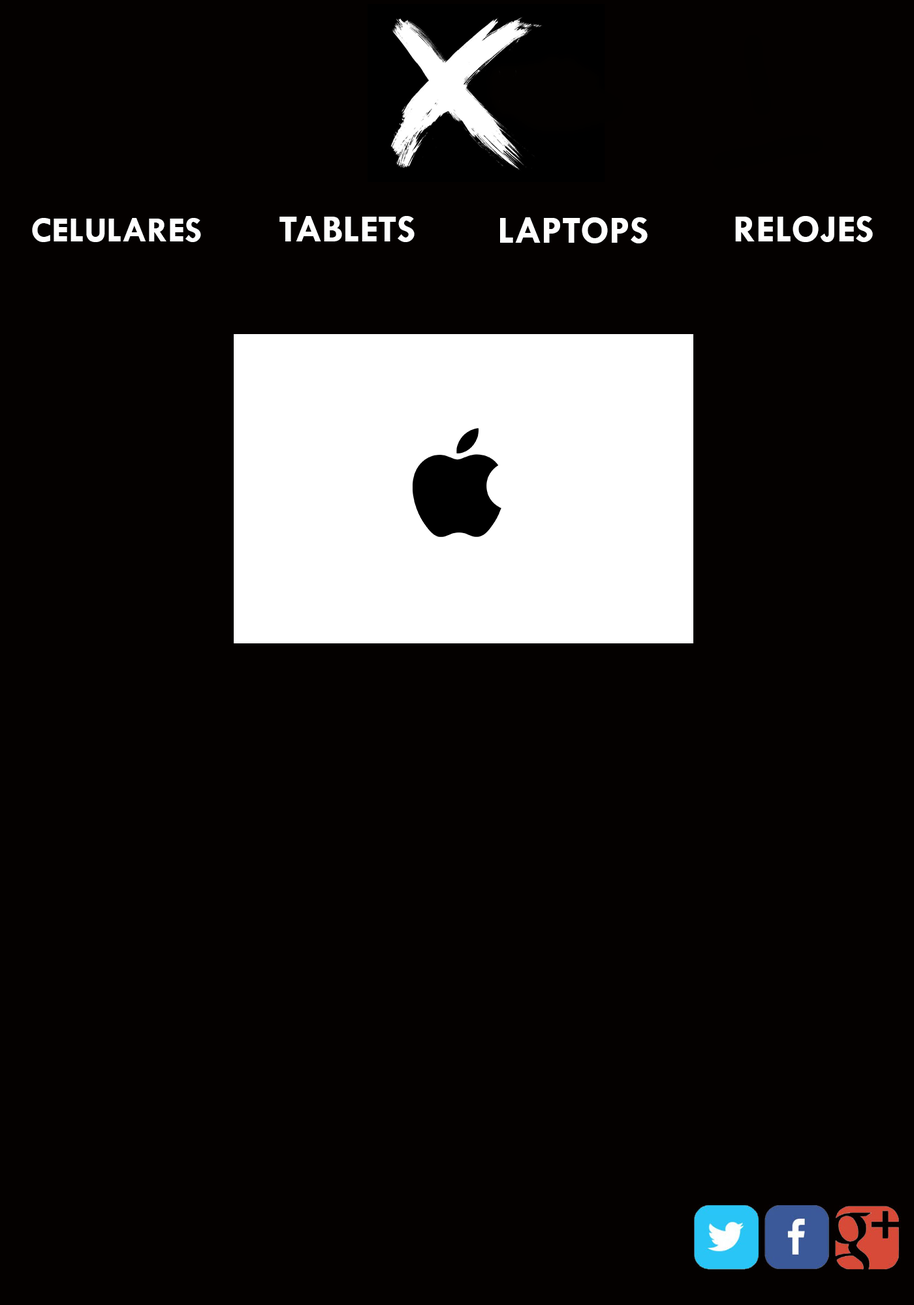
<style>
.page{position:relative;width:914px;height:1305px;background:#040100}
.page>*{position:absolute;margin:0}
.t1{font:35.9px "TwCenMT-Bold";color:#fefefe}
.t2{font:19.6px "TwCenMT-Bold";color:#fefefe}
.t3{font:39.2px "TwCenMT-Bold";color:#fefefe}
</style>
<div class="page">
<p class="t1" style="left:32px;top:218px;width:169px;height:24px"><span class="t2"><br></span>CELULARES</p>
<p class="t3" style="left:279px;top:216px;width:135px;height:26px">TABLETS</p>
<p class="t3" style="left:500px;top:217px;width:147px;height:26px">LAPTOPS</p>
<p class="t3" style="left:735px;top:216px;width:138px;height:26px">RELOJES</p>
</div>
